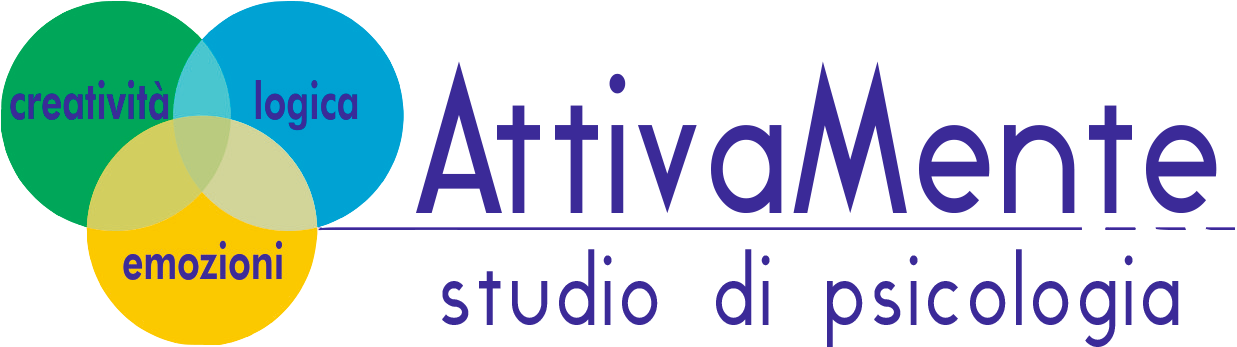
<style>
.page{position:relative;width:1237px;height:347px;background:#ffffff}
.page>*{position:absolute;margin:0}
.t1{font:200px "Geddes";color:#3b2a98}
.t2{font:100px "Geddes";letter-spacing:0.04em;color:#3b2a98}
</style>
<div class="page">
<p class="t1" style="left:416px;top:61px;width:801px;height:152px">AttivaMente</p>
<p class="t2" style="left:442px;top:249px;width:737px;height:98px">studio di psicologia</p>
</div>
